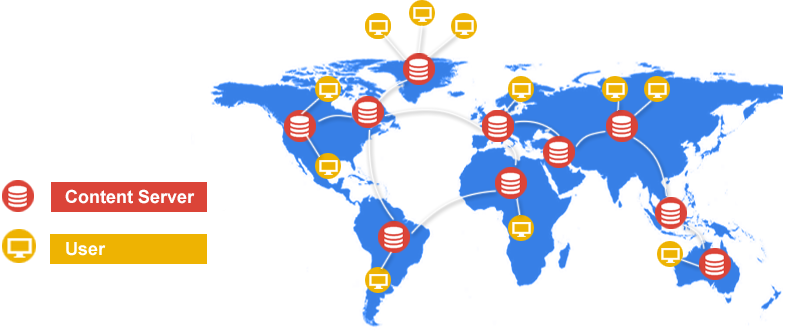
<style>
.page{position:relative;width:800px;height:331px;background:#ffffff}
.page>*{position:absolute;margin:0}
.t1{font:18px "Arial-BoldMT";color:#ffffff}
</style>
<div class="page">
<p class="t1" style="left:65px;top:189px;width:130px;height:15px">Content Server</p>
</div>
